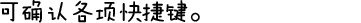
<style>
.page{position:relative;width:361px;height:23px;background:#ffffff}
.page>*{position:absolute;margin:0}
.t1{font:26px "¢è?";color:#000000}
</style>
<div class="page">
<p class="t1" style="left:0px;top:0px;width:200px;height:23px">可确认各项快捷键。</p>
</div>
